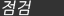
<style>
.page{position:relative;width:64px;height:16px;background:#333333}
.page>*{position:absolute;margin:0}
.t1{font:16px "NanumGothic";color:#ffffff;font-style:italic}
</style>
<div class="page">
<p class="t1" style="left:2px;top:0px;width:29px;height:16px">점검</p>
</div>
